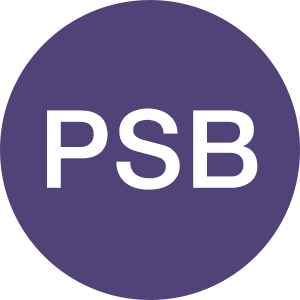
<style>
.page{position:relative;width:300px;height:300px;background:#514378}
.page>*{position:absolute;margin:0}
.t1{font:108px "HelveticaNeue-Medium";letter-spacing:0.02em;color:#ffffff}
</style>
<div class="page">
<p class="t1" style="left:47px;top:108px;width:211px;height:82px">PSB</p>
</div>
